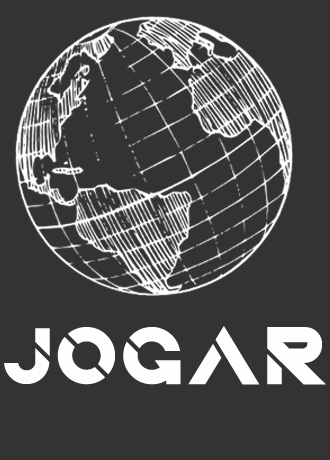
<style>
.page{position:relative;width:330px;height:460px;background:#333333}
.page>*{position:absolute;margin:0}
.t1{font:83px "QuantumRegular";color:#fefefe}
</style>
<div class="page">
<p class="t1" style="left:4px;top:326px;width:322px;height:59px">JOGAR</p>
</div>
